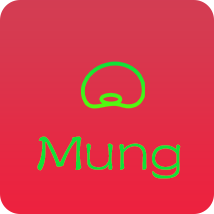
<style>
.page{position:relative;width:214px;height:214px}
.page>*{position:absolute;margin:0}
.t1{font:60px "FZSTK--GBK1-0";color:#0fe238}
</style>
<div class="page">
<p class="t1" style="left:37px;top:136px;width:144px;height:43px">Mung</p>
</div>
